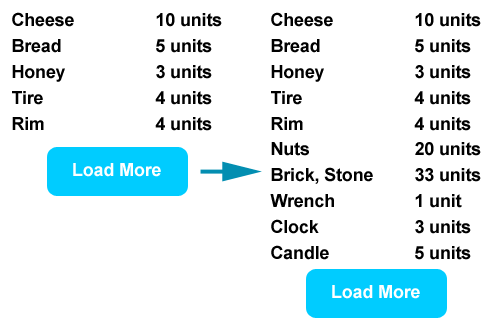
<style>
.page{position:relative;width:500px;height:329px;background:#ffffff}
.page>*{position:absolute;margin:0}
.t1{font:18px/26px "Arial-BoldMT";letter-spacing:-0.01em;color:#000000}
.t2{font:18px "Arial-BoldMT";letter-spacing:-0.01em;color:#ffffff}
</style>
<div class="page">
<p class="t1" style="left:12px;top:12px;width:210px;height:119px">Cheese    10 units<br>Bread    5 units<br>Honey    3 units<br>Tire     4 units<br>Rim     4 units</p>
<p class="t1" style="left:271px;top:12px;width:210px;height:119px">Cheese    10 units<br>Bread    5 units<br>Honey    3 units<br>Tire     4 units<br>Rim     4 units</p>
<p class="t1" style="left:270px;top:142px;width:211px;height:118px">Nuts    20 units<br>Brick, Stone   33 units<br>Wrench    1 unit<br>Clock    3 units<br>Candle    5 units</p>
<p class="t2" style="left:73px;top:163px;width:88px;height:14px">Load More</p>
<p class="t2" style="left:332px;top:285px;width:88px;height:14px">Load More</p>
</div>
